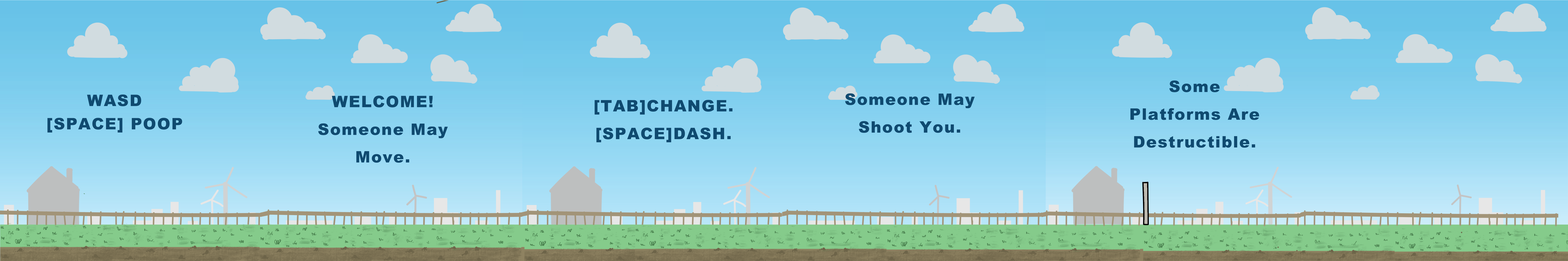
<style>
.page{position:relative;width:1568px;height:261px}
.page>*{position:absolute;margin:0}
.t1{font:15.8px "Arial-Black";letter-spacing:0.06em;color:#0f4a70}
</style>
<div class="page">
<p class="t1" style="left:1130px;top:81px;width:129px;height:67px;text-align:center">Some Platforms Are Destructible.<br>      [SPACE]BOOMB.</p>
<p class="t1" style="left:87px;top:95px;width:54px;height:11px">WASD</p>
<p class="t1" style="left:318px;top:96px;width:130px;height:67px;text-align:center">WELCOME!      <br>Someone May                    Move.</p>
<p class="t1" style="left:595px;top:100px;width:138px;height:43px;text-align:center">[TAB]CHANGE.<br>[SPACE]DASH.</p>
<p class="t1" style="left:845px;top:93px;width:130px;height:40px;text-align:center">Someone May Shoot You.</p>
<p class="t1" style="left:47px;top:118px;width:135px;height:15px">[SPACE] POOP</p>
</div>
